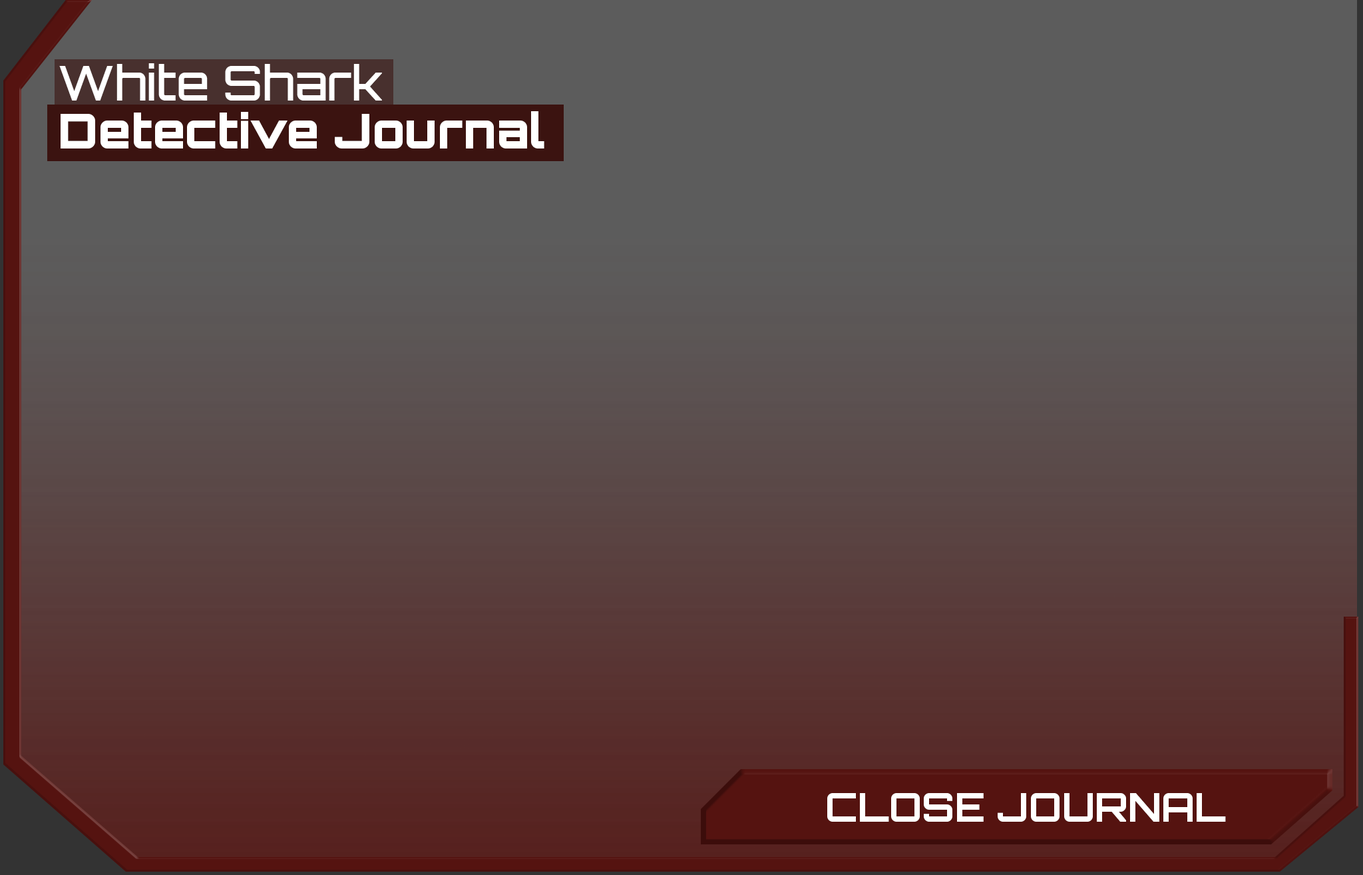
<style>
.page{position:relative;width:1363px;height:875px;background:#5c5c5c}
.page>*{position:absolute;margin:0}
.t1{font:47.9px/47.9px "Orbitron-Black";color:#ffffff}
.t2{font:47.9px/47.9px "Orbitron-Medium";color:#ffffff}
.t3{font:39.9px "Orbitron-Bold";color:#ffffff}
</style>
<div class="page">
<p class="t1" style="left:59px;top:63px;width:486px;height:85px"><span class="t2">White Shark<br></span>Detective Journal</p>
<p class="t3" style="left:827px;top:793px;width:399px;height:28px">CLOSE JOURNAL</p>
</div>
